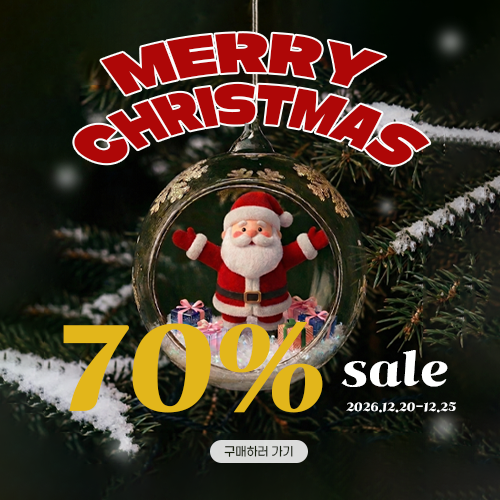
<style>
.page{position:relative;width:500px;height:500px}
.page>*{position:absolute;margin:0}
.t1{font:38.3px/42.7px "Partial-Sans-KR";letter-spacing:0.02em;color:#ae0707}
.t2{font:119.7px "ghanachoco";color:#e2b61b}
.t3{font:45.4px "ghanachoco";color:#ffffff}
.t4{font:11.7px "ghanachoco";letter-spacing:0.02em;color:#ffffff}
</style>
<div class="page">
<p class="t1" style="left:74px;top:33px;width:356px;height:132px;text-align:center">MERRY <br>CHRISTMAS</p>
<p class="t2" style="left:63px;top:322px;width:260px;height:91px">70%</p>
<p class="t3" style="left:341px;top:350px;width:107px;height:37px">sale</p>
<p class="t4" style="left:346px;top:402px;width:110px;height:11px">2026.12.20-12.25</p>
</div>
